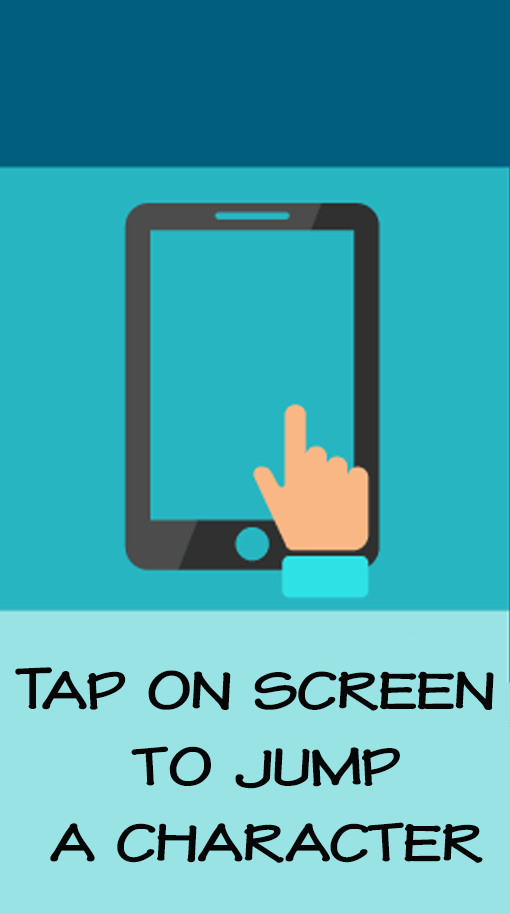
<style>
.page{position:relative;width:510px;height:914px;background:#27b6c1}
.page>*{position:absolute;margin:0}
.t1{font:63.5px "HL-Comic1unicode-Normal";color:#060606}
</style>
<div class="page">
<p class="t1" style="left:15px;top:667px;width:479px;height:196px;text-align:center">Tap on screen<br> to jump<br> a character</p>
</div>
